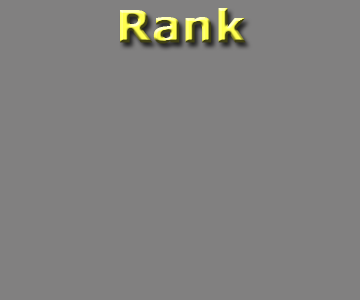
<style>
.page{position:relative;width:360px;height:300px;background:#818080}
.page>*{position:absolute;margin:0}
.t1{font:44px "Verdana-Bold";font-weight:bold}
</style>
<div class="page">
<p class="t1" style="left:120px;top:8px;width:126px;height:36px">Rank</p>
</div>
